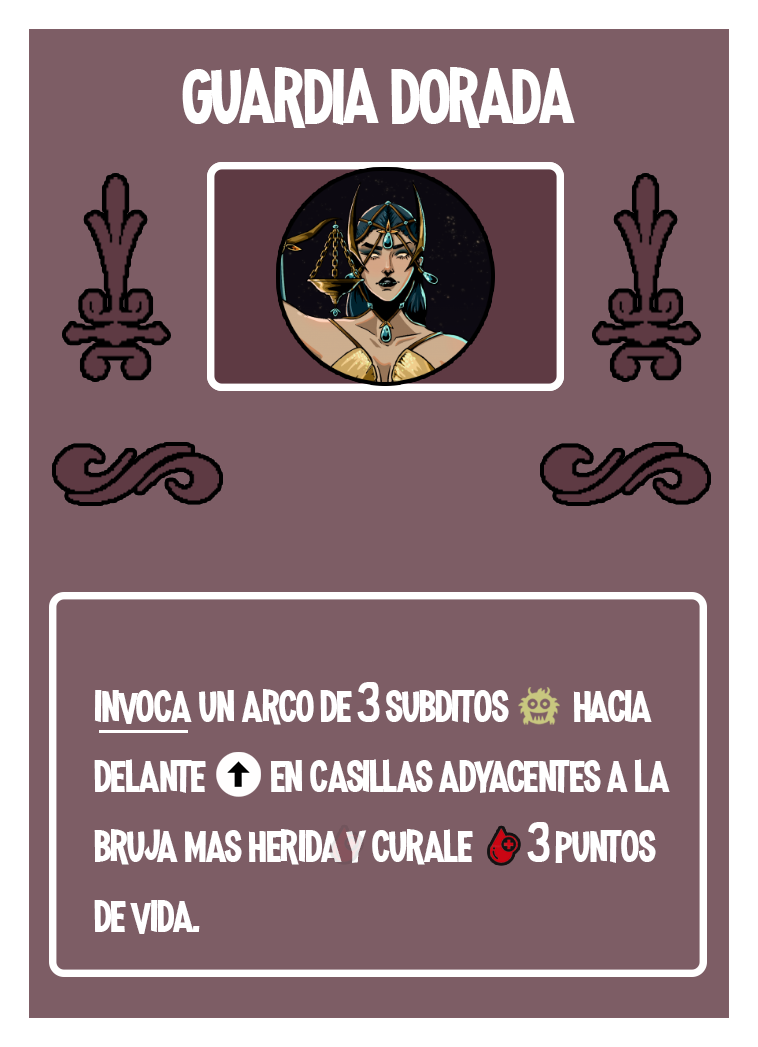
<style>
.page{position:relative;width:758px;height:1047px;background:#7d5d65}
.page>*{position:absolute;margin:0}
.t1{font:100px "MadnessHyperactive";color:#ffffff}
.t2{font:58.3px "MadnessHyperactive";color:#ffffff}
</style>
<div class="page">
<p class="t1" style="left:182px;top:67px;width:393px;height:61px">guardia dorada</p>
<p class="t2" style="left:94px;top:682px;width:576px;height:252px">invoca un arco de 3 subditos        hacia delante        en casillas adyacentes a la bruja mas herida y curale       3 puntos de vida.</p>
</div>
